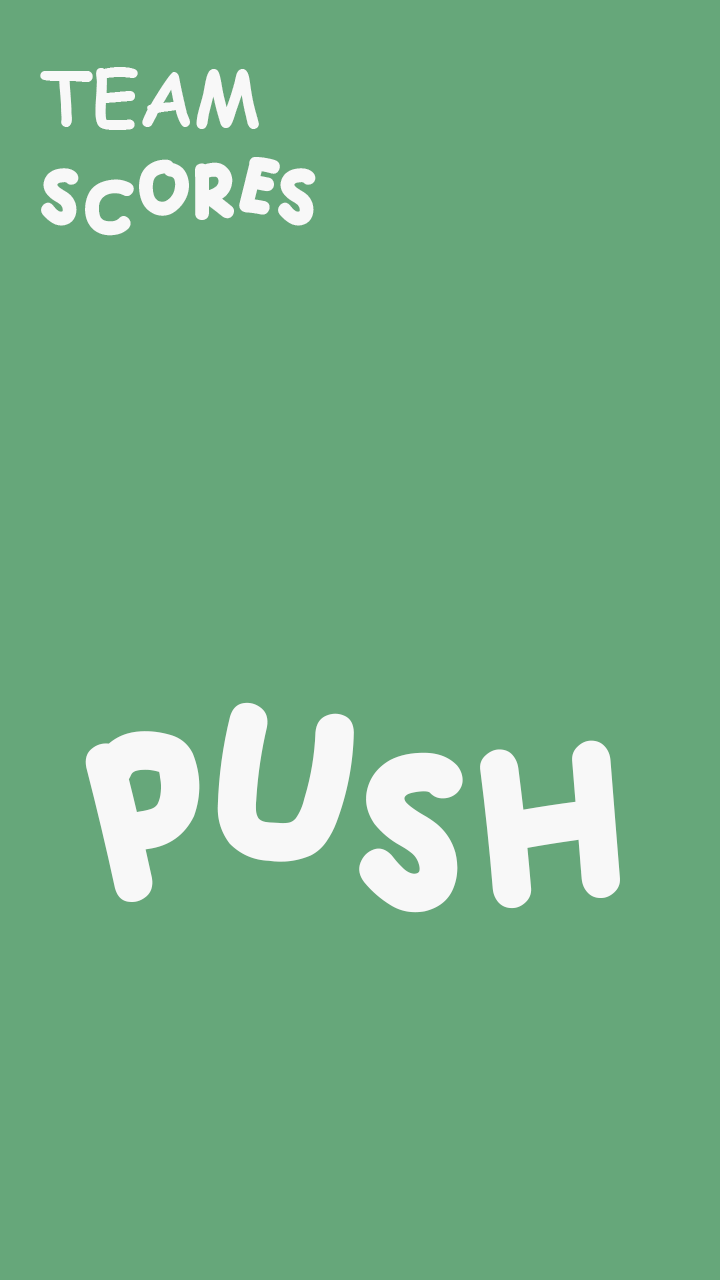
<style>
.page{position:relative;width:720px;height:1280px;background:#66a77a}
.page>*{position:absolute;margin:0}
.t1{font:75px "ComicSansMS-Bold";color:#f8f8f8}
.t2{font:61px "ADELIA";color:#f8f8f8}
.t3{font:170.3px "ADELIA";color:#f8f8f8}
</style>
<div class="page">
<p class="t1" style="left:40px;top:67px;width:219px;height:63px">TEAM</p>
<p class="t2" style="left:41px;top:157px;width:275px;height:79px">scores</p>
<p class="t3" style="left:85px;top:702px;width:535px;height:211px">push</p>
</div>
